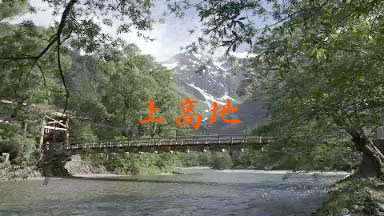
<style>
.page{position:relative;width:384px;height:216px}
.page>*{position:absolute;margin:0}
.t1{font:36px "DFSNGyoSho-W5-MP-RKSJ-H";color:#f85800}
</style>
<div class="page">
<p class="t1" style="left:138px;top:97px;width:104px;height:33px">上高地</p>
</div>
